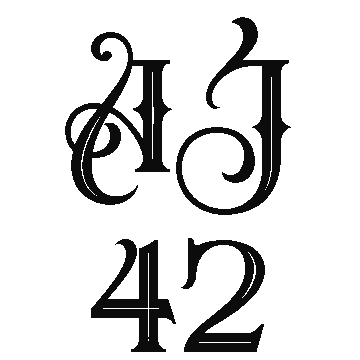
<style>
.page{position:relative;width:360px;height:360px;background:#ffffff}
.page>*{position:absolute;margin:0}
.t1{font:150px "Slacksluger";color:#0c0c0c}
</style>
<div class="page">
<p class="t1" style="left:65px;top:17px;width:226px;height:335px;text-align:center">AJ<br>42</p>
</div>
